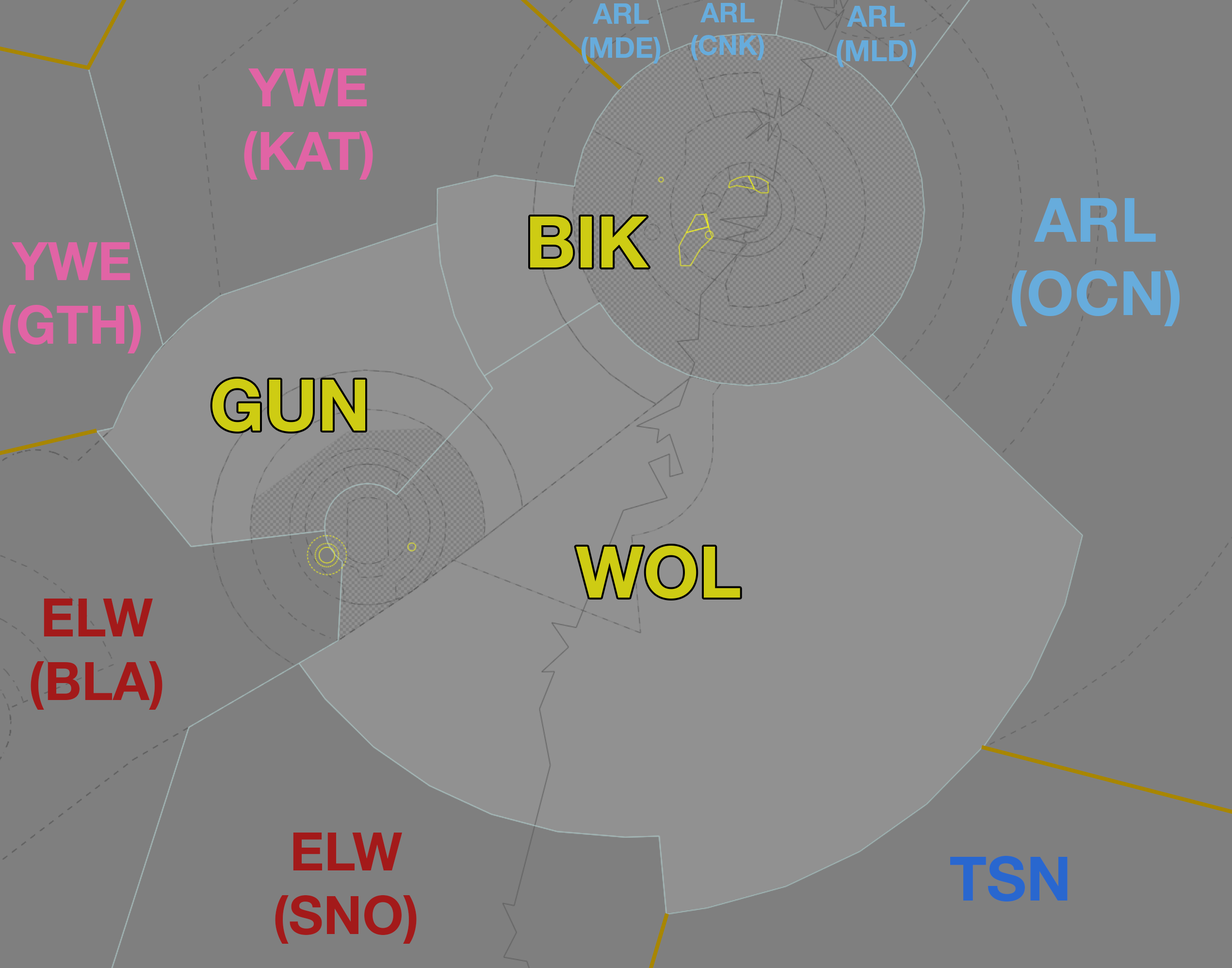
<style>
.page{position:relative;width:1232px;height:968px;background:#7f7f7f}
.page>*{position:absolute;margin:0}
.t1{font:28.4px "HelveticaNeueLTStd-Bd";color:#67acdc}
.t2{font:27.1px "HelveticaNeueLTStd-Bd";color:#67acdc}
.t3{font:29px "HelveticaNeueLTStd-Bd";color:#67acdc}
.t4{font:53.1px "HelveticaNeueLTStd-Bd";color:#e164a5}
.t5{font:61.2px "HelveticaNeueLTStd-Bd";color:#67acdc}
.t6{font:71.7px "HelveticaNeueLTStd-Bd";color:#cecc13}
.t7{font:53.1px "HelveticaNeueLTStd-Bd";color:#a31a1a}
.t8{font:61.2px "HelveticaNeueLTStd-Bd";color:#2967cf}
</style>
<div class="page">
<p class="t1" style="left:582px;top:3px;width:79px;height:61px;text-align:center">ARL<br>(MDE)</p>
<p class="t2" style="left:691px;top:3px;width:73px;height:57px;text-align:center">ARL<br>(CNK)</p>
<p class="t3" style="left:837px;top:6px;width:80px;height:61px;text-align:center">ARL<br>(MLD)</p>
<p class="t4" style="left:244px;top:68px;width:129px;height:112px;text-align:center">YWE<br>(KAT)</p>
<p class="t5" style="left:1012px;top:197px;width:168px;height:129px;text-align:center">ARL<br>(OCN)</p>
<p class="t6" style="left:530px;top:216px;width:119px;height:51px">BIK</p>
<p class="t4" style="left:2px;top:242px;width:139px;height:111px;text-align:center">YWE<br>(GTH)</p>
<p class="t6" style="left:212px;top:378px;width:153px;height:53px">GUN</p>
<p class="t6" style="left:576px;top:545px;width:164px;height:53px">WOL</p>
<p class="t7" style="left:31px;top:598px;width:132px;height:111px;text-align:center">ELW<br>(BLA)</p>
<p class="t7" style="left:275px;top:832px;width:142px;height:111px;text-align:center">ELW<br>(SNO)</p>
<p class="t8" style="left:951px;top:855px;width:117px;height:47px">TSN</p>
</div>
